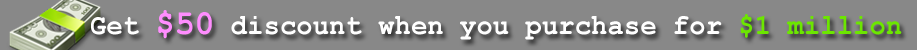
<style>
.page{position:relative;width:917px;height:50px;background:#888888}
.page>*{position:absolute;margin:0}
.t1{font:29.2px "CourierNewPS-BoldMT";color:#ffffff;scale:0.94 1}
.t2{font:35px "CourierNewPS-BoldMT";color:#ff8dfe;scale:0.94 1}
.t3{font:29.2px "CourierNewPS-BoldMT";color:#6ce600;scale:0.94 1}
</style>
<div class="page">
<p class="t1" style="left:91px;top:10px;width:811px;height:30px">Get <span class="t2">$50</span> discount when you purchase for <span class="t3">$1 million</span></p>
</div>
